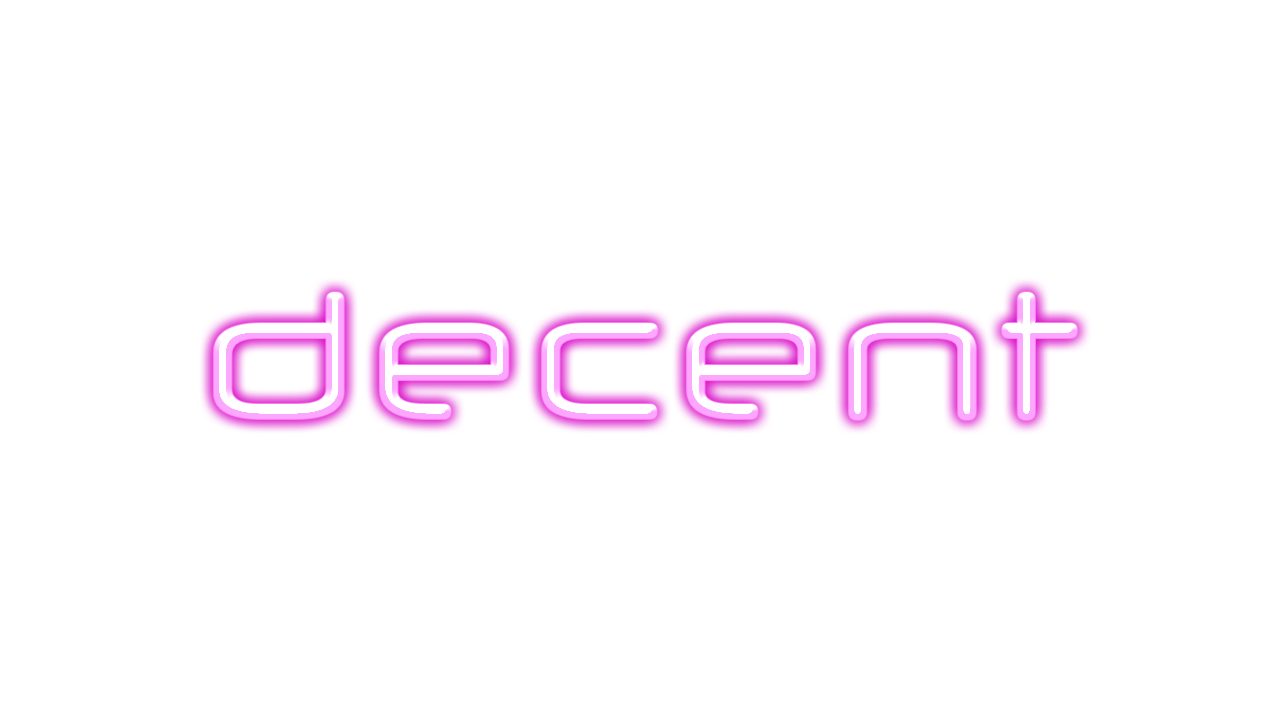
<style>
.page{position:relative;width:1280px;height:720px;background:#ffffff}
.page>*{position:absolute;margin:0}
.t1{font:180px "NeuropolXFree"}
</style>
<div class="page">
<p class="t1" style="left:213px;top:292px;width:865px;height:128px">decent</p>
</div>
